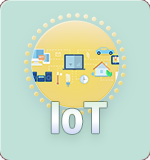
<style>
.page{position:relative;width:150px;height:160px;background:#bfe1d7}
.page>*{position:absolute;margin:0}
.t1{font:38.9px "KoreanTITGD5-R";letter-spacing:-0.01em;color:#ffffff}
</style>
<div class="page">
<p class="t1" style="left:51px;top:102px;width:56px;height:32px">IoT</p>
</div>
